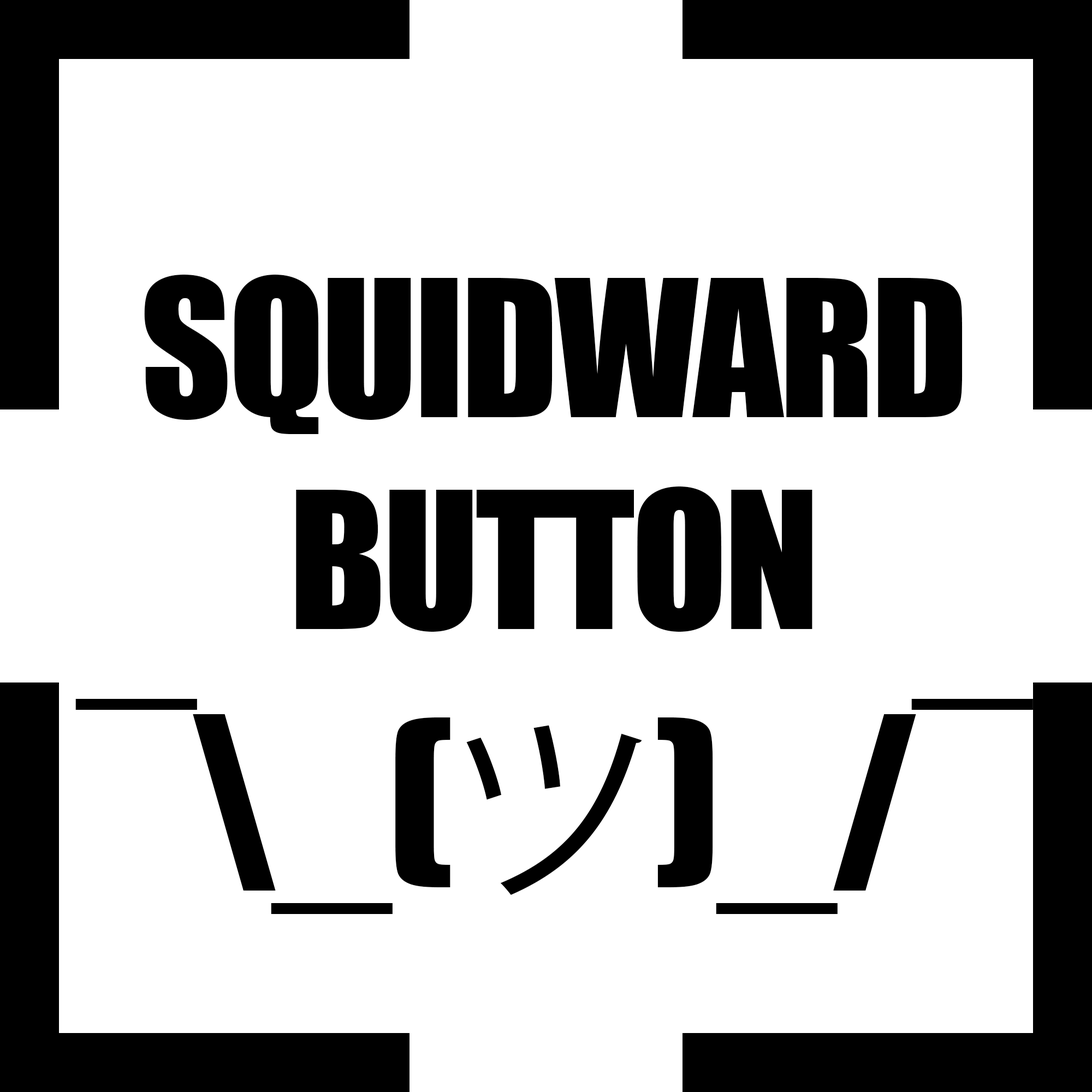
<style>
.page{position:relative;width:1092px;height:1092px;background:#ffffff}
.page>*{position:absolute;margin:0}
.t1{font:176.4px "Impact";letter-spacing:-0.02em;color:#000000}
.t2{font:215.1px "Impact";letter-spacing:-0.02em;color:#000000}
.t3{font:215.1px "KozGoPr6N-Regular";letter-spacing:-0.02em;color:#000000}
</style>
<div class="page">
<p class="t1" style="left:75px;top:275px;width:958px;height:639px;text-align:center">SQUIDWARD<br>BUTTON<br><span class="t2">¯\_(</span><span class="t3">ツ</span><span class="t2">)_/¯</span></p>
</div>
